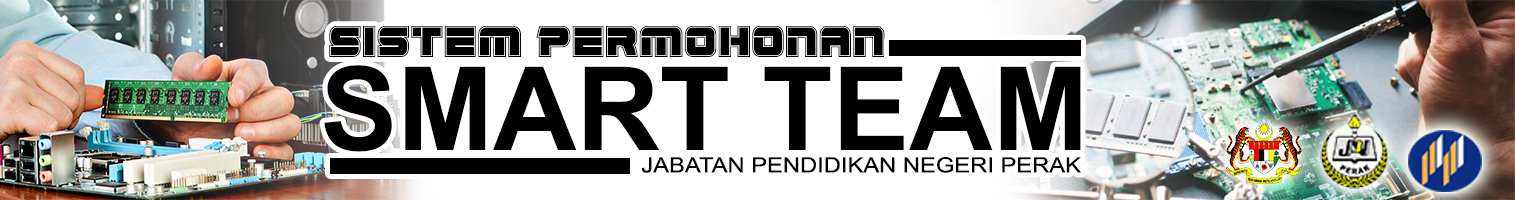
<style>
.page{position:relative;width:1515px;height:200px;background:#ffffff}
.page>*{position:absolute;margin:0}
.t1{font:52.5px "EdgeRacerAcademy";color:#000000}
.t2{font:115.9px "Arial-BoldMT";color:#000000}
.t3{font:21px "ArialNarrow";color:#000000;scale:1.38 1}
</style>
<div class="page">
<p class="t1" style="left:329px;top:26px;width:556px;height:31px">Sistem Permohonan</p>
<p class="t2" style="left:324px;top:65px;width:757px;height:87px">SMART TEAM</p>
<p class="t3" style="left:641px;top:157px;width:440px;height:16px">JABATAN PENDIDIKAN NEGERI PERAK</p>
</div>
